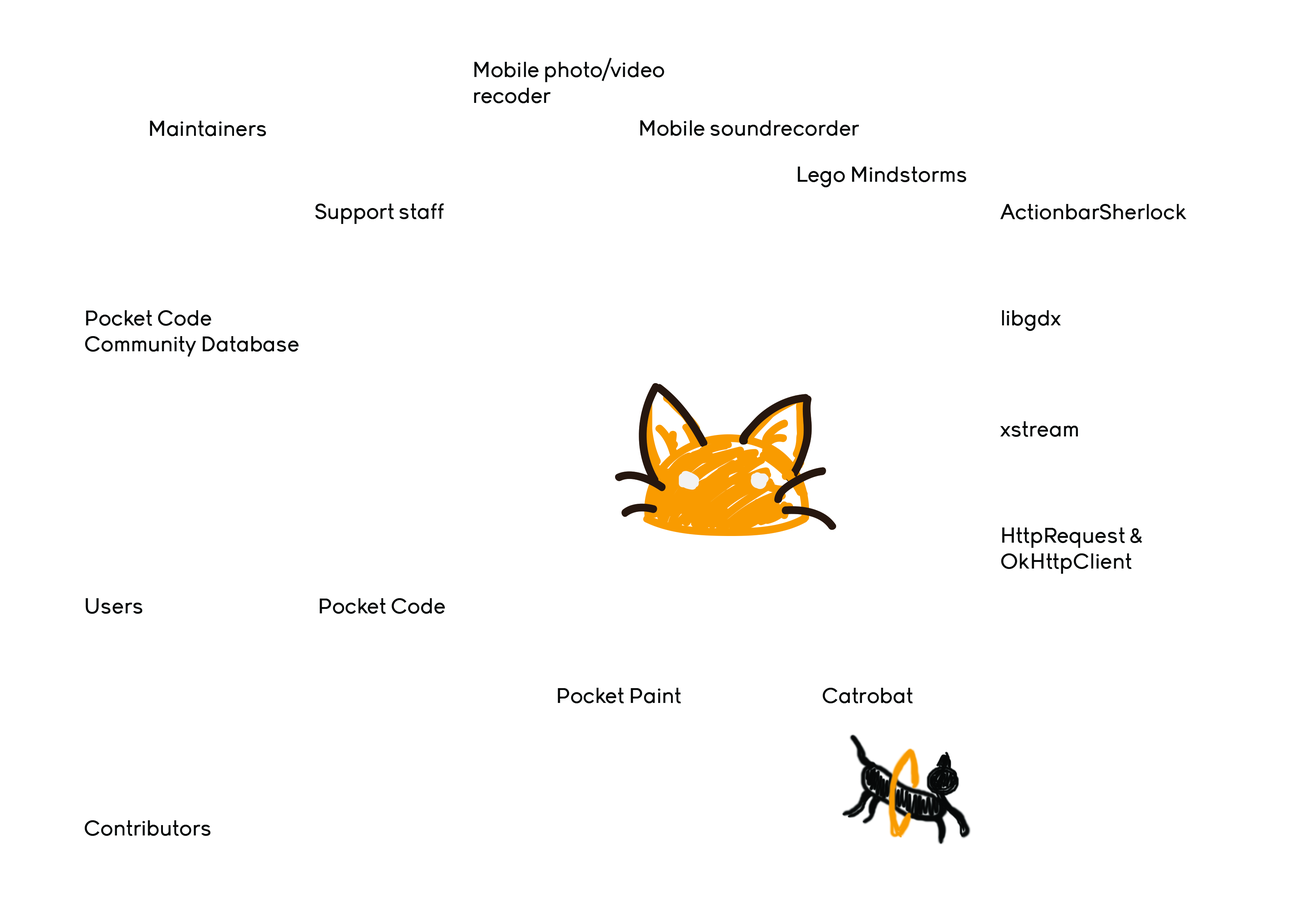
<style>
.page{position:relative;width:1299px;height:918px;background:#ffffff}
.page>*{position:absolute;margin:0}
.t1{font:21.6px "Young";color:#060808}
</style>
<div class="page">
<p class="t1" style="left:474px;top:58px;width:190px;height:45px">Mobile photo/video<br>recoder</p>
<p class="t1" style="left:150px;top:121px;width:116px;height:15px">Maintainers</p>
<p class="t1" style="left:640px;top:120px;width:219px;height:16px">Mobile soundrecorder</p>
<p class="t1" style="left:797px;top:167px;width:169px;height:20px">Lego Mindstorms</p>
<p class="t1" style="left:315px;top:203px;width:129px;height:21px">Support staff</p>
<p class="t1" style="left:1000px;top:204px;width:186px;height:16px">ActionbarSherlock</p>
<p class="t1" style="left:85px;top:310px;width:214px;height:47px">Pocket Code<br>Community Database</p>
<p class="t1" style="left:1002px;top:310px;width:59px;height:21px">libgdx</p>
<p class="t1" style="left:1000px;top:421px;width:78px;height:16px">xstream</p>
<p class="t1" style="left:1001px;top:528px;width:141px;height:46px">HttpRequest &amp; OkHttpClient</p>
<p class="t1" style="left:86px;top:598px;width:57px;height:16px">Users</p>
<p class="t1" style="left:320px;top:598px;width:125px;height:16px">Pocket Code</p>
<p class="t1" style="left:558px;top:688px;width:123px;height:15px">Pocket Paint</p>
<p class="t1" style="left:822px;top:688px;width:91px;height:15px">Catrobat</p>
<p class="t1" style="left:84px;top:820px;width:127px;height:16px">Contributors</p>
</div>
